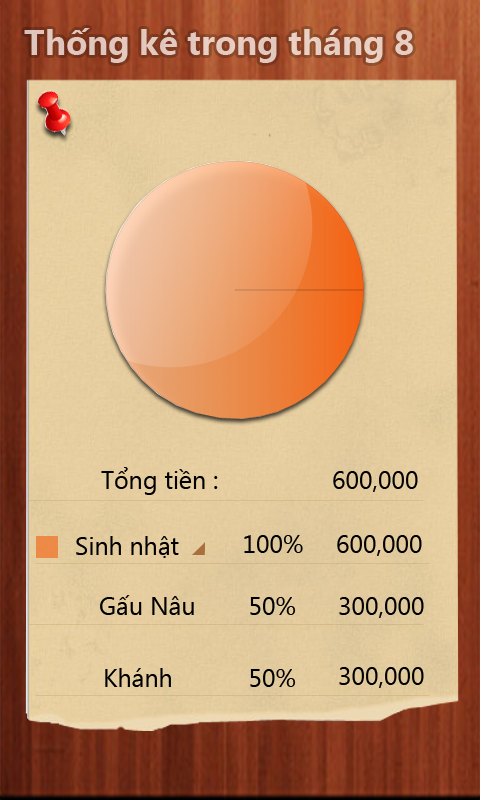
<style>
.page{position:relative;width:480px;height:800px}
.page>*{position:absolute;margin:0}
.t1{font:35px "SegoeUI-Bold";color:#e4cac0}
.t2{font:25px "SegoeUI";color:#000000}
</style>
<div class="page">
<p class="t1" style="left:24px;top:28px;width:389px;height:35px">Thống kê trong tháng 8</p>
<p class="t2" style="left:101px;top:467px;width:117px;height:28px">Tổng tiền :</p>
<p class="t2" style="left:333px;top:471px;width:85px;height:21px">600,000</p>
<p class="t2" style="left:76px;top:536px;width:103px;height:22px">Sinh nhật</p>
<p class="t2" style="left:244px;top:535px;width:59px;height:18px">100%</p>
<p class="t2" style="left:337px;top:535px;width:85px;height:21px">600,000</p>
<p class="t2" style="left:100px;top:595px;width:94px;height:20px">Gấu Nâu</p>
<p class="t2" style="left:250px;top:597px;width:46px;height:18px">50%</p>
<p class="t2" style="left:339px;top:597px;width:85px;height:21px">300,000</p>
<p class="t2" style="left:105px;top:668px;width:66px;height:19px">Khánh</p>
<p class="t2" style="left:250px;top:669px;width:46px;height:18px">50%</p>
<p class="t2" style="left:339px;top:667px;width:85px;height:21px">300,000</p>
</div>
